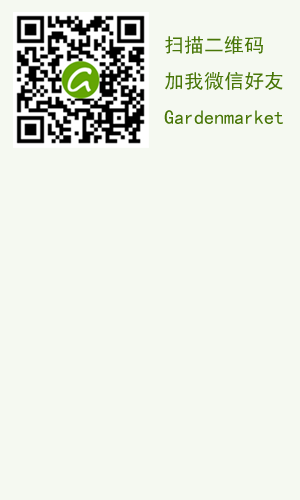
<style>
.page{position:relative;width:300px;height:500px;background:#f5f9f1}
.page>*{position:absolute;margin:0}
.t1{font:20px/36px "SimHei";color:#487607}
</style>
<div class="page">
<p class="t1" style="left:164px;top:36px;width:119px;height:88px">扫描二维码<br>加我微信好友<br>Gardenmarket</p>
</div>
